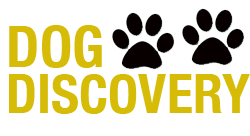
<style>
.page{position:relative;width:250px;height:136px;background:#ffffff}
.page>*{position:absolute;margin:0}
.t1{font:54.2px/45.8px "HelveticaNeue-CondensedBold";color:#d6bb07;text-transform:uppercase}
.t2{font:58.3px "HelveticaNeue-CondensedBold";color:#d6bb07;text-transform:uppercase}
</style>
<div class="page">
<p class="t1" style="left:9px;top:25px;width:241px;height:89px"><span class="t2">Dog<br></span>Discovery</p>
</div>
